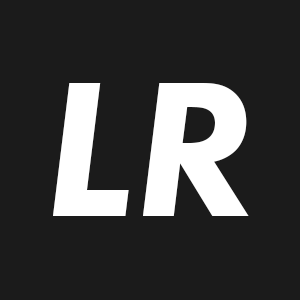
<style>
.page{position:relative;width:300px;height:300px;background:#1b1b1b}
.page>*{position:absolute;margin:0}
.t1{font:200px "FuturaPT-HeavyObl";color:#ffffff}
</style>
<div class="page">
<p class="t1" style="left:53px;top:83px;width:196px;height:133px">LR</p>
</div>
